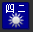
<style>
.page{position:relative;width:33px;height:32px;background:#000090}
.page>*{position:absolute;margin:0}
.t1{font:10.4px "SimSun";color:#ffffff}
</style>
<div class="page">
<p class="t1" style="left:6px;top:4px;width:19px;height:9px">四二</p>
</div>
